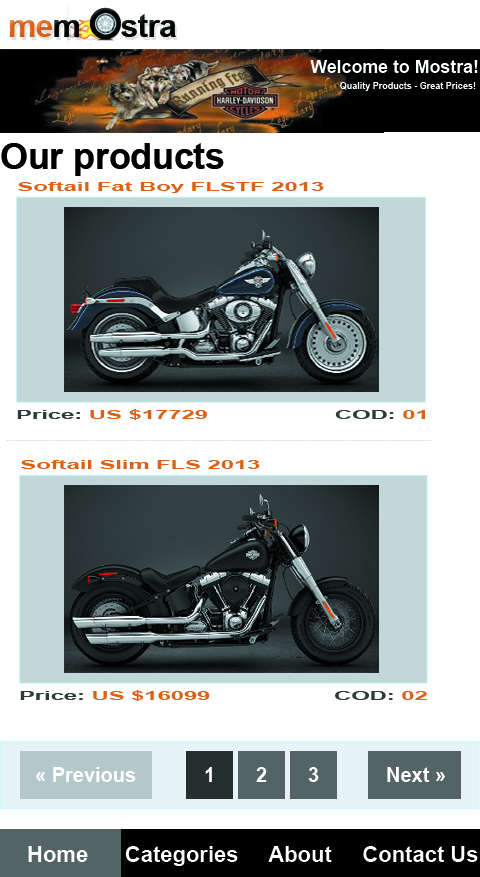
<style>
.page{position:relative;width:480px;height:877px;background:#ffffff}
.page>*{position:absolute;margin:0}
.t1{font:31.6px "Arial-BoldMT";letter-spacing:-0.02em;color:#000000}
.t2{font:31.6px "Arial-BoldMT";letter-spacing:-0.02em;color:#da6117}
.t3{font:17.8px "Arial-BoldMT";color:#ffffff}
.t4{font:9px "Arial-BoldMT";color:#fefefe}
.t5{font:35.5px "Arial-BoldMT";color:#000000}
.t6{font:12px "Arial-BoldMT";color:#da6116;scale:1.99 1}
.t7{font:12px "Arial-BoldMT";color:#303a3c;scale:1.99 1}
.t8{font:12px "Arial-BoldMT";color:#da6115;scale:1.99 1}
.t9{font:12.1px "Arial-BoldMT";color:#da6115;scale:1.96 1}
.t10{font:12.1px "Arial-BoldMT";color:#da6116;scale:1.96 1}
.t11{font:12.1px "Arial-BoldMT";color:#303a3c;scale:1.96 1}
.t12{font:20px "Arial-BoldMT";color:#ffffff}
.t13{font:22px "Arial-BoldMT";color:#ffffff}
</style>
<div class="page">
<p class="t1" style="left:9px;top:14px;width:167px;height:23px"><span class="t2"> me</span>m     stra</p>
<p class="t3" style="left:310px;top:60px;width:168px;height:13px">Welcome to Mostra!</p>
<p class="t4" style="left:340px;top:82px;width:136px;height:9px">Quality Products - Great Prices!</p>
<p class="t5" style="left:1px;top:143px;width:223px;height:33px">Our products</p>
<p class="t6" style="left:18px;top:182px;width:306px;height:11px">Softail Fat Boy FLSTF 2013</p>
<p class="t6" style="left:17px;top:409px;width:190px;height:11px"><span class="t7">Price: </span>US $17729</p>
<p class="t7" style="left:335px;top:410px;width:90px;height:9px">COD: <span class="t8">01</span></p>
<p class="t9" style="left:21px;top:460px;width:239px;height:9px">Softail Slim FLS 2013</p>
<p class="t10" style="left:20px;top:690px;width:190px;height:11px"><span class="t11">Price: </span>US $16099</p>
<p class="t11" style="left:335px;top:691px;width:92px;height:9px">COD: <span class="t9">02</span></p>
<p class="t12" style="left:36px;top:767px;width:100px;height:15px">« Previous</p>
<p class="t12" style="left:205px;top:767px;width:7px;height:15px">1</p>
<p class="t12" style="left:256px;top:767px;width:11px;height:15px">2</p>
<p class="t12" style="left:308px;top:767px;width:11px;height:15px">3</p>
<p class="t12" style="left:387px;top:767px;width:58px;height:15px">Next »</p>
<p class="t13" style="left:28px;top:846px;width:450px;height:20px">Home      Categories     About     Contact Us</p>
</div>
